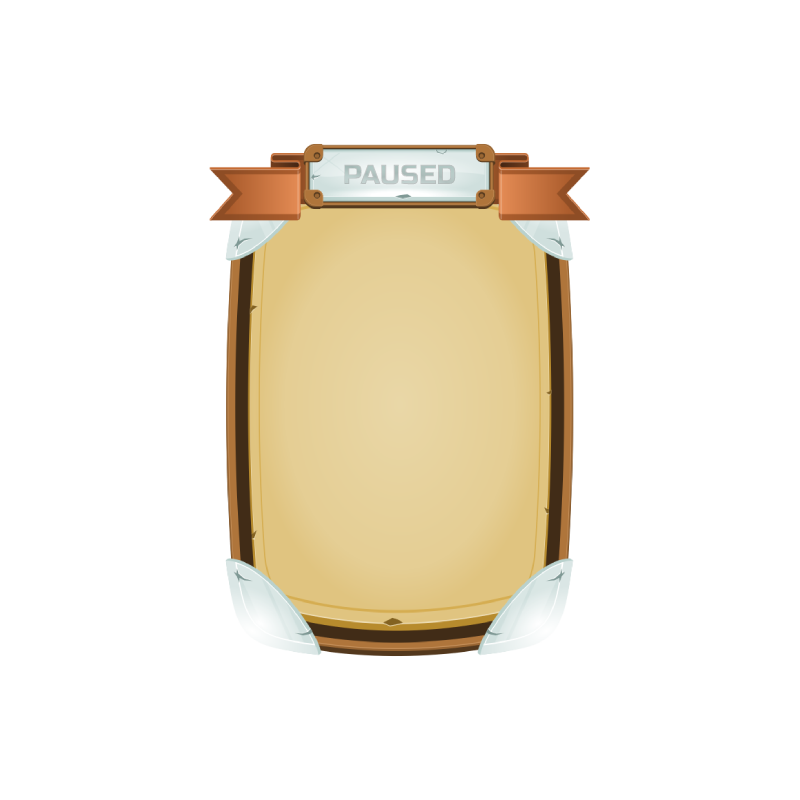
<style>
.page{position:relative;width:800px;height:800px;background:#ffffff}
.page>*{position:absolute;margin:0}
.t1{font:27.6px "RussoOne-Regular";color:#b7c5c2}
</style>
<div class="page">
<p class="t1" style="left:344px;top:164px;width:112px;height:21px">PAUSED</p>
</div>
